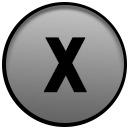
<style>
.page{position:relative;width:128px;height:128px;background:#ffffff}
.page>*{position:absolute;margin:0}
.t1{font:67.3px "HGSSoeiKakugothicUB";color:#010101;font-weight:bold;scale:1.11 1}
</style>
<div class="page">
<p class="t1" style="left:44px;top:37px;width:43px;height:56px">X</p>
</div>
